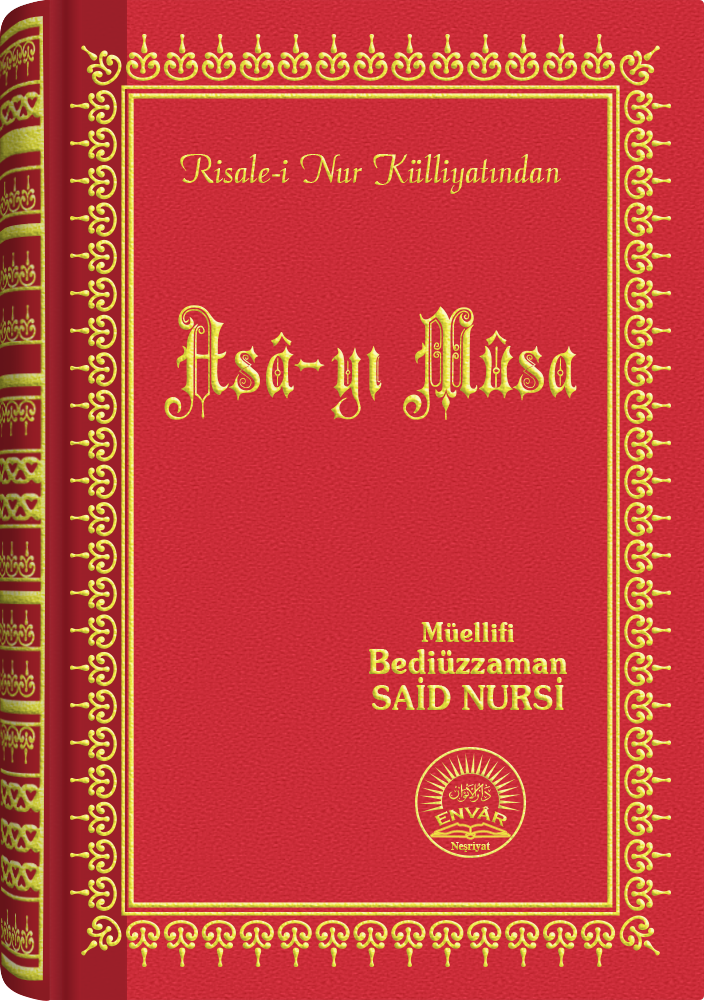
<style>
.page{position:relative;width:704px;height:1001px}
.page>*{position:absolute;margin:0}
.t1{font:45.3px "Barla © 072 Aria ScriptScriptSSi";scale:0.94 1}
.t2{font:116px "Barla © 001 Liva Nur";letter-spacing:-0.001em;scale:0.93 1}
.t3{font:33.4px/32.4px "SouvenirITCbyBT-Demi";scale:0.93 1}
.t4{font:27.4px/24.4px "SouvenirITCbyBT-Demi";scale:0.93 1}
.t5{font:33.4px/36.4px "SouvenirITCbyBT-Demi";scale:0.93 1}
.t6{font:15.6px "CopperplateGothic-Bold"}
.t7{font:11.2px "Times-Bold";scale:0.96 1}
</style>
<div class="page">
<p class="t1" style="left:180px;top:154px;width:381px;height:40px">Risale-i Nur Külliyatından</p>
<p class="t2" style="left:164px;top:305px;width:413px;height:115px">Asâ-yı Mûsa</p>
<p class="t3" style="left:369px;top:622px;width:198px;height:88px;text-align:center"><span class="t4">Müellifi<br></span>Bediüzzaman<br><span class="t5">SAİD NURSİ</span></p>
<p class="t6" style="left:434px;top:806px;width:73px;height:21px">ENVÂR</p>
<p class="t7" style="left:451px;top:842px;width:39px;height:10px">Neşriyat</p>
</div>
